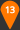
<style>
.page{position:relative;width:20px;height:30px;background:#ff7800}
.page>*{position:absolute;margin:0}
.t1{font:9px "OpenSans";color:#ffffff;font-weight:bold}
</style>
<div class="page">
<p class="t1" style="left:5px;top:6px;width:10px;height:8px">13</p>
</div>
